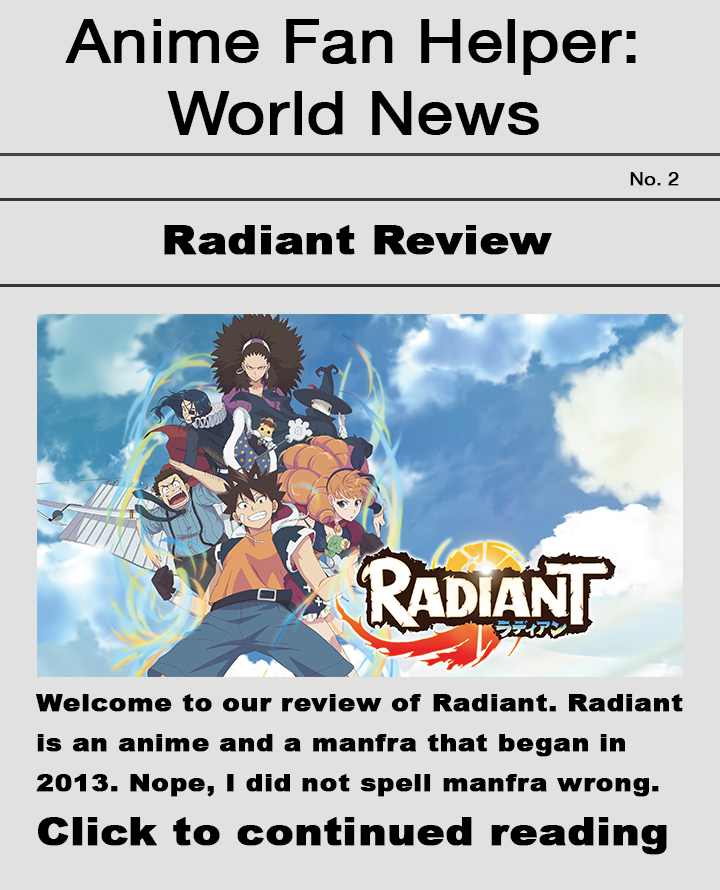
<style>
.page{position:relative;width:720px;height:890px;background:#e1e1e1}
.page>*{position:absolute;margin:0}
.t1{font:60px "HelveticaNeue";color:#000000;font-weight:bold;scale:1.1 1}
.t2{font:18px "HelveticaNeue";color:#000000;font-weight:bold;scale:1.1 1}
.t3{font:40px "Arial-Black";color:#000000;font-weight:bold;scale:1.1 1}
.t4{font:24px/40px "Arial-Black";color:#000000;font-weight:bold;scale:1.1 1}
.t5{font:38px "Arial-Black";color:#000000;font-weight:bold;scale:1.1 1}
</style>
<div class="page">
<p class="t1" style="left:65px;top:19px;width:571px;height:116px;text-align:center">Anime Fan Helper: World News</p>
<p class="t2" style="left:630px;top:172px;width:49px;height:14px">No. 2</p>
<p class="t3" style="left:164px;top:225px;width:388px;height:30px">Radiant Review</p>
<p class="t4" style="left:36px;top:694px;width:647px;height:103px">Welcome to our review of Radiant. Radiant is an anime and a manfra that began in 2013. Nope, I did not spell manfra wrong.</p>
<p class="t5" style="left:38px;top:817px;width:629px;height:38px">Click to continued reading</p>
</div>
